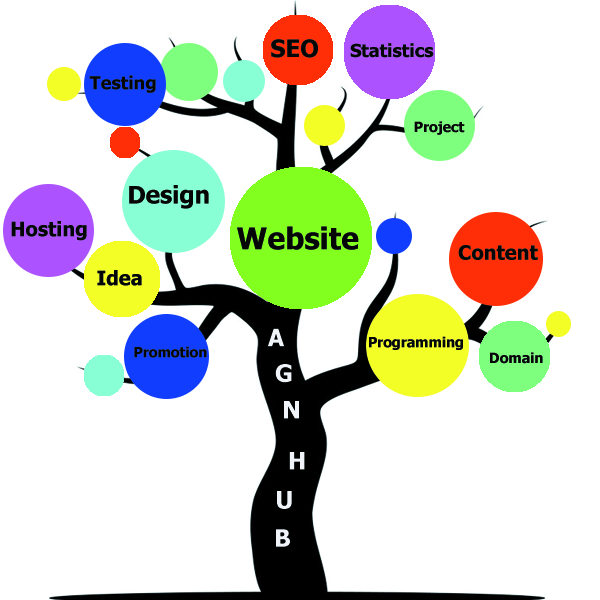
<style>
.page{position:relative;width:600px;height:600px;background:#ffffff}
.page>*{position:absolute;margin:0}
.t1{font:24px "Tahoma-Bold";color:#050707}
.t2{font:18px "Tahoma-Bold";color:#050707}
.t3{font:14px "Tahoma-Bold";color:#050707}
.t4{font:20px "Tahoma-Bold";color:#050707}
.t5{font:30px "Tahoma-Bold";color:#050707}
.t6{font:24px "Tahoma-Bold";color:#f0f4f8}
</style>
<div class="page">
<p class="t1" style="left:271px;top:39px;width:47px;height:19px">SEO</p>
<p class="t2" style="left:350px;top:43px;width:84px;height:15px">Statistics</p>
<p class="t2" style="left:89px;top:75px;width:67px;height:18px">Testing</p>
<p class="t3" style="left:414px;top:121px;width:51px;height:14px">Project</p>
<p class="t1" style="left:129px;top:185px;width:80px;height:24px">Design</p>
<p class="t4" style="left:11px;top:221px;width:76px;height:20px">Hosting</p>
<p class="t5" style="left:237px;top:226px;width:122px;height:24px">Website</p>
<p class="t4" style="left:458px;top:245px;width:80px;height:15px">Content</p>
<p class="t4" style="left:97px;top:270px;width:45px;height:16px">Idea</p>
<p class="t6" style="left:267px;top:328px;width:18px;height:19px">A</p>
<p class="t3" style="left:369px;top:336px;width:94px;height:14px">Programming</p>
<p class="t3" style="left:134px;top:346px;width:73px;height:12px">Promotion</p>
<p class="t3" style="left:490px;top:352px;width:53px;height:12px">Domain</p>
<p class="t6" style="left:275px;top:364px;width:17px;height:19px">G</p>
<p class="t6" style="left:284px;top:401px;width:15px;height:18px">N</p>
<p class="t6" style="left:289px;top:452px;width:16px;height:18px">H</p>
<p class="t6" style="left:277px;top:491px;width:15px;height:18px">U</p>
<p class="t6" style="left:276px;top:529px;width:14px;height:18px">B</p>
</div>
